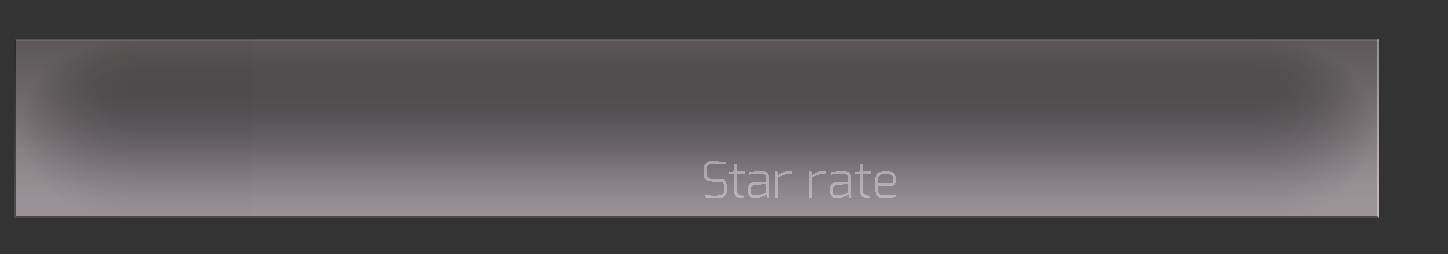
<style>
.page{position:relative;width:1448px;height:254px;background:#333333}
.page>*{position:absolute;margin:0}
.t1{font:50px "Exo-Light";color:#b3aeb2}
</style>
<div class="page">
<p class="t1" style="left:704px;top:161px;width:192px;height:37px">Star rate</p>
</div>
